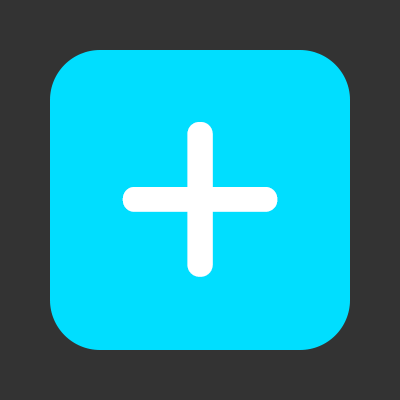
<style>
.page{position:relative;width:400px;height:400px;background:#00deff}
.page>*{position:absolute;margin:0}
.t1{font:320px "VarelaRound-Regular";color:#ffffff}
</style>
<div class="page">
<p class="t1" style="left:122px;top:122px;width:156px;height:155px">+</p>
</div>
